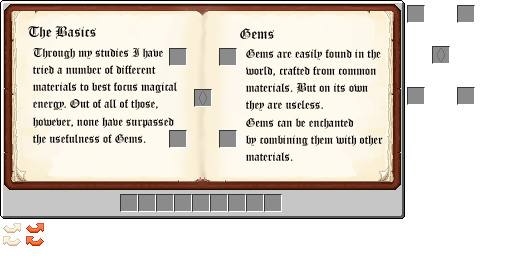
<style>
.page{position:relative;width:512px;height:256px;background:#ffffff}
.page>*{position:absolute;margin:0}
.t1{font:14.6px "OldEnglishTextMT";color:#000000}
.t2{font:12px/17.3px "OldEnglishTextMT";color:#000000}
</style>
<div class="page">
<p class="t1" style="left:28px;top:26px;width:68px;height:13px">The Basics</p>
<p class="t1" style="left:240px;top:28px;width:34px;height:11px">Gems</p>
<p class="t2" style="left:33px;top:48px;width:145px;height:97px">Through my studies I have<br>tried a number of different<br>materials to best focus magical<br>energy. Out of all of those,<br>however, none have surpassed<br>the usefulness of Gems.</p>
<p class="t2" style="left:246px;top:49px;width:137px;height:112px">Gems are easily found in the<br>world, crafted from common<br>materials. But on its own<br>they are useless.<br>Gems can be enchanted<br>by combining them with other<br>materials.</p>
</div>
